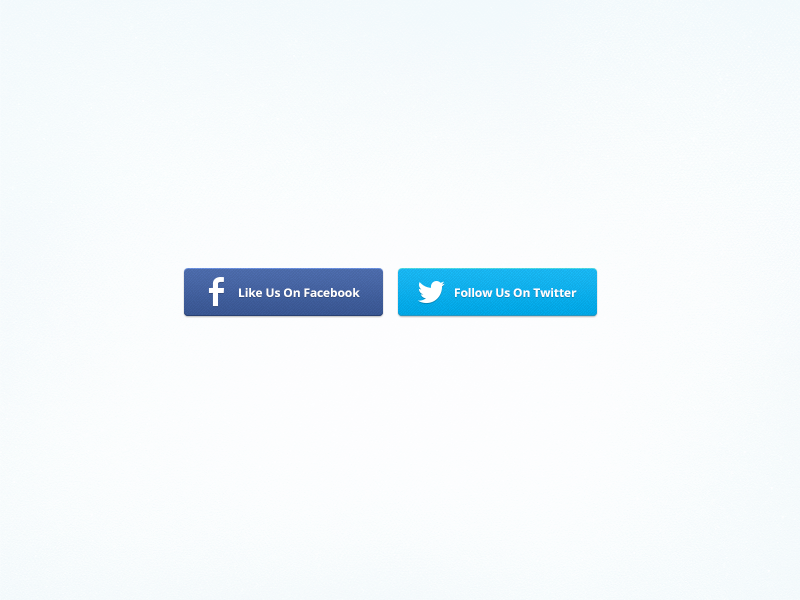
<style>
.page{position:relative;width:800px;height:600px}
.page>*{position:absolute;margin:0}
.t1{font:12px "OpenSans-Bold";letter-spacing:-0.01em;color:#ffffff}
</style>
<div class="page">
<p class="t1" style="left:239px;top:288px;width:121px;height:9px">Like Us On Facebook</p>
<p class="t1" style="left:455px;top:288px;width:122px;height:9px">Follow Us On Twitter</p>
</div>
